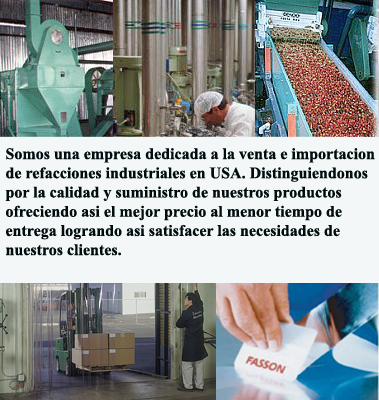
<style>
.page{position:relative;width:379px;height:400px;background:#f3f7f8}
.page>*{position:absolute;margin:0}
.t1{font:16px "TimesNewRomanPS-BoldMT";color:#010c0f}
</style>
<div class="page">
<p class="t1" style="left:5px;top:148px;width:370px;height:108px">Somos una empresa dedicada a la venta e importacion<br>de refacciones industriales en USA. Distinguiendonos <br>por la calidad y suministro de nuestros productos <br>ofreciendo asi el mejor precio al menor tiempo de <br>entrega logrando asi satisfacer las necesidades de<br>nuestros clientes.</p>
</div>
